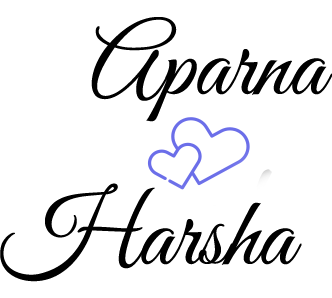
<style>
.page{position:relative;width:332px;height:298px;background:#ffffff}
.page>*{position:absolute;margin:0}
.t1{font:100px "GreatVibes-Regular";color:#000000}
</style>
<div class="page">
<p class="t1" style="left:91px;top:17px;width:242px;height:105px">Aparna</p>
<p class="t1" style="left:0px;top:183px;width:302px;height:99px">Harsha</p>
</div>
